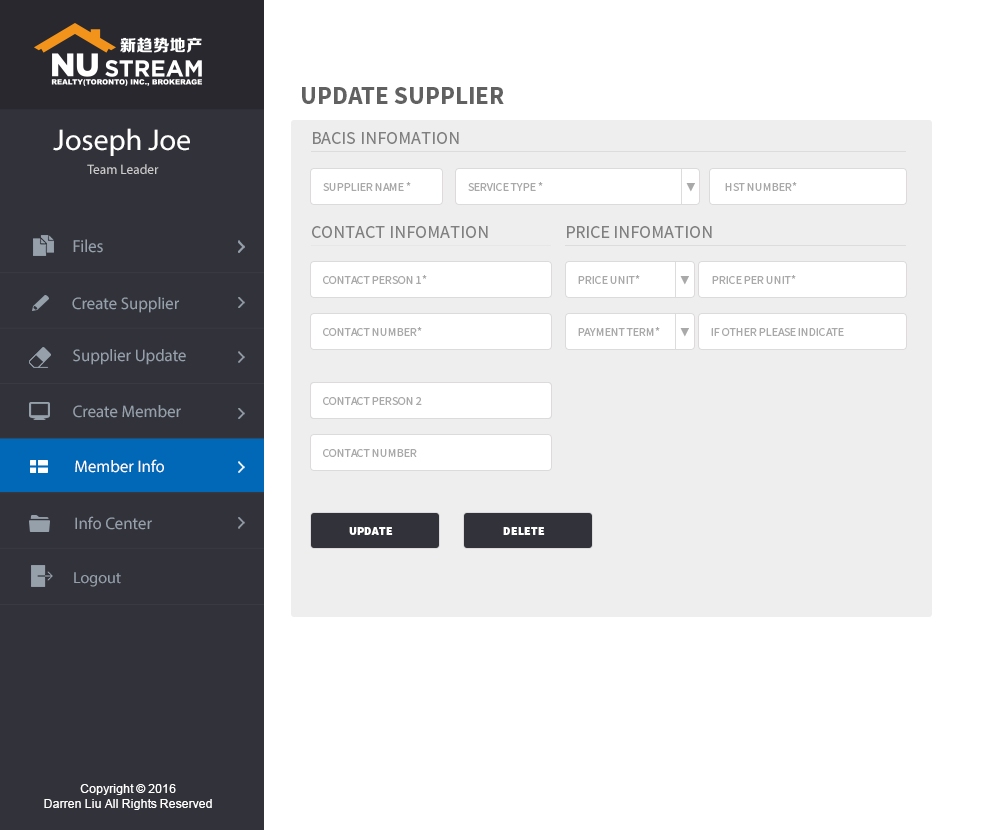
<style>
.page{position:relative;width:1000px;height:830px;background:#ffffff}
.page>*{position:absolute;margin:0}
.t1{font:25px "SourceSansPro-Bold";color:#616161}
.t2{font:30px "MyriadPro-Regular";color:#ffffff}
.t3{font:18px "SourceSansPro-Regular";color:#808080}
.t4{font:13.4px "MyriadPro-Regular";color:#cccccc}
.t5{font:12px "SourceSansPro-Regular";color:#a9a9a9}
.t6{font:10px "AdobeHeitiStd-Regular";color:#a9a9a9}
.t7{font:17.6px "MyriadPro-Regular";color:#95a0aa;scale:0.96 1}
.t8{font:16.8px "MyriadPro-Regular";color:#95a0aa}
.t9{font:16.8px "MyriadPro-Regular";color:#ffffff}
.t10{font:12px "SourceSansPro-Black";color:#ffffff}
.t11{font:16px "MyriadPro-Regular";color:#95a0aa}
.t12{font:12px "ArialMT";color:#ffffff}
</style>
<div class="page">
<p class="t1" style="left:302px;top:87px;width:202px;height:17px">UPDATE SUPPLIER</p>
<p class="t2" style="left:53px;top:128px;width:137px;height:28px">Joseph Joe</p>
<p class="t3" style="left:313px;top:132px;width:146px;height:12px">BACIS INFOMATION</p>
<p class="t4" style="left:87px;top:164px;width:72px;height:10px">Team Leader</p>
<p class="t5" style="left:323px;top:182px;width:88px;height:9px">SUPPLIER NAME *</p>
<p class="t5" style="left:468px;top:182px;width:75px;height:9px">SERVICE TYPE *</p>
<p class="t6" style="left:686px;top:183px;width:9px;height:9px">▼</p>
<p class="t5" style="left:725px;top:182px;width:72px;height:9px">HST NUMBER*</p>
<p class="t3" style="left:312px;top:226px;width:176px;height:12px">CONTACT INFOMATION</p>
<p class="t3" style="left:567px;top:226px;width:145px;height:12px">PRICE INFOMATION</p>
<p class="t7" style="left:73px;top:239px;width:30px;height:14px">Files</p>
<p class="t5" style="left:323px;top:275px;width:104px;height:9px">CONTACT PERSON 1*</p>
<p class="t5" style="left:578px;top:275px;width:62px;height:9px">PRICE UNIT*</p>
<p class="t6" style="left:680px;top:276px;width:9px;height:9px">▼</p>
<p class="t5" style="left:712px;top:275px;width:84px;height:9px">PRICE PER UNIT*</p>
<p class="t8" style="left:72px;top:297px;width:107px;height:16px">Create Supplier</p>
<p class="t5" style="left:323px;top:327px;width:99px;height:9px">CONTACT NUMBER*</p>
<p class="t5" style="left:578px;top:327px;width:82px;height:9px">PAYMENT TERM*</p>
<p class="t6" style="left:680px;top:328px;width:9px;height:9px">▼</p>
<p class="t5" style="left:711px;top:328px;width:133px;height:8px">IF OTHER PLEASE INDICATE</p>
<p class="t8" style="left:73px;top:349px;width:113px;height:16px">Supplier Update</p>
<p class="t5" style="left:323px;top:397px;width:99px;height:8px">CONTACT PERSON 2</p>
<p class="t5" style="left:323px;top:397px;width:99px;height:8px">CONTACT PERSON 2</p>
<p class="t8" style="left:73px;top:405px;width:108px;height:13px">Create Member</p>
<p class="t5" style="left:323px;top:449px;width:94px;height:8px">CONTACT NUMBER</p>
<p class="t9" style="left:75px;top:459px;width:89px;height:14px">Member Info</p>
<p class="t8" style="left:75px;top:516px;width:77px;height:14px">Info Center</p>
<p class="t10" style="left:349px;top:527px;width:44px;height:8px">UPDATE</p>
<p class="t10" style="left:503px;top:527px;width:42px;height:8px">DELETE</p>
<p class="t11" style="left:74px;top:572px;width:47px;height:15px">Logout</p>
<p class="t12" style="left:44px;top:784px;width:168px;height:26px;text-align:center">Copyright © 2016<br>Darren Liu All Rights Reserved</p>
</div>
